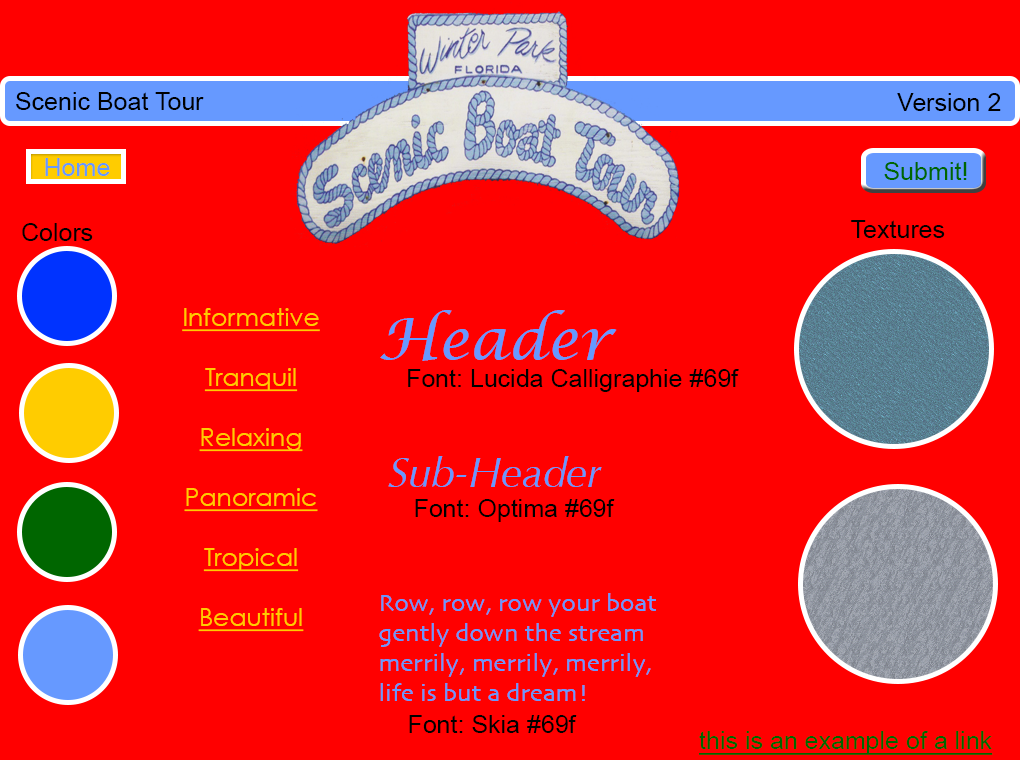
<style>
.page{position:relative;width:1020px;height:760px;background:#ff0000}
.page>*{position:absolute;margin:0}
.t1{font:25px "ArialMT";color:#000000}
.t2{font:25px "ArialMT";color:#6699ff}
.t3{font:25px "ArialMT";color:#006600}
.t4{font:25px "CenturyGothic";color:#ffcc00;text-decoration:underline}
.t5{font:58.3px "LucidaCalligraphy-Italic";color:#6699ff}
.t6{font:41.7px "Optima-Italic";color:#6699ff}
.t7{font:25px "Skia-Regular";color:#6699ff}
.t8{font:25px "ArialMT";color:#006600;text-decoration:underline}
</style>
<div class="page">
<p class="t1" style="left:16px;top:92px;width:188px;height:18px">Scenic Boat Tour</p>
<p class="t1" style="left:897px;top:93px;width:104px;height:18px">Version 2</p>
<p class="t2" style="left:45px;top:158px;width:65px;height:18px">Home</p>
<p class="t3" style="left:884px;top:162px;width:83px;height:18px">Submit!</p>
<p class="t1" style="left:851px;top:220px;width:94px;height:18px">Textures</p>
<p class="t1" style="left:22px;top:223px;width:71px;height:18px">Colors</p>
<p class="t4" style="left:182px;top:308px;width:138px;height:324px;text-align:center">Informative<br><br>Tranquil<br><br>Relaxing<br><br>Panoramic<br><br>Tropical<br><br>Beautiful</p>
<p class="t5" style="left:380px;top:310px;width:237px;height:51px">Header</p>
<p class="t1" style="left:408px;top:369px;width:331px;height:23px">Font: Lucida Calligraphie #69f</p>
<p class="t6" style="left:388px;top:456px;width:214px;height:31px">Sub-Header</p>
<p class="t1" style="left:415px;top:499px;width:200px;height:23px">Font: Optima #69f</p>
<p class="t7" style="left:379px;top:593px;width:277px;height:108px">Row, row, row your boat<br>gently down the stream<br>merrily, merrily, merrily,<br>life is but a dream!</p>
<p class="t1" style="left:409px;top:715px;width:168px;height:18px">Font: Skia #69f</p>
<p class="t8" style="left:699px;top:731px;width:294px;height:24px">this is an example of a link</p>
</div>
